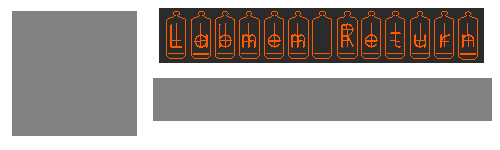
<style>
.page{position:relative;width:500px;height:150px;background:#828282}
.page>*{position:absolute;margin:0}
.t1{font:32px "BONX-TubeBold";color:#ff5a00}
</style>
<div class="page">
<p class="t1" style="left:166px;top:11px;width:312px;height:49px">Labmem Return</p>
</div>
